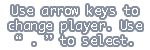
<style>
.page{position:relative;width:150px;height:50px;background:#ffffff}
.page>*{position:absolute;margin:0}
.t1{font:12.5px "Ayuthaya";color:#ffffff}
</style>
<div class="page">
<p class="t1" style="left:9px;top:5px;width:133px;height:40px;text-align:center">Use arrow keys to change player. Use<br>“ . ” to select.</p>
</div>
